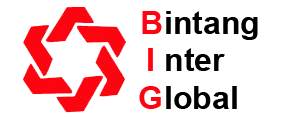
<style>
.page{position:relative;width:283px;height:118px;background:#ffffff}
.page>*{position:absolute;margin:0}
.t1{font:32px "Arial-BoldMT";color:#fe0410}
.t2{font:32px "Arial-BoldMT";color:#000000}
</style>
<div class="page">
<p class="t1" style="left:142px;top:11px;width:20px;height:23px">B</p>
<p class="t2" style="left:166px;top:11px;width:92px;height:29px">intang</p>
<p class="t1" style="left:148px;top:48px;width:5px;height:23px">I</p>
<p class="t2" style="left:166px;top:48px;width:59px;height:23px">nter</p>
<p class="t1" style="left:139px;top:86px;width:22px;height:23px">G</p>
<p class="t2" style="left:166px;top:86px;width:71px;height:23px">lobal</p>
</div>
